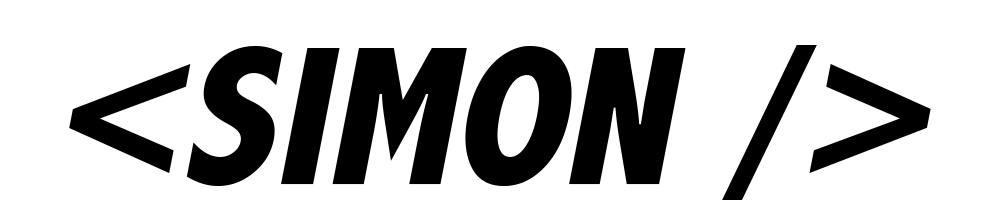
<style>
.page{position:relative;width:1000px;height:222px;background:#ffffff}
.page>*{position:absolute;margin:0}
.t1{font:200px "AbadiMT-CondensedExtraBold";color:#000000;font-style:italic}
</style>
<div class="page">
<p class="t1" style="left:69px;top:45px;width:862px;height:155px">&lt;SIMON /&gt;</p>
</div>
